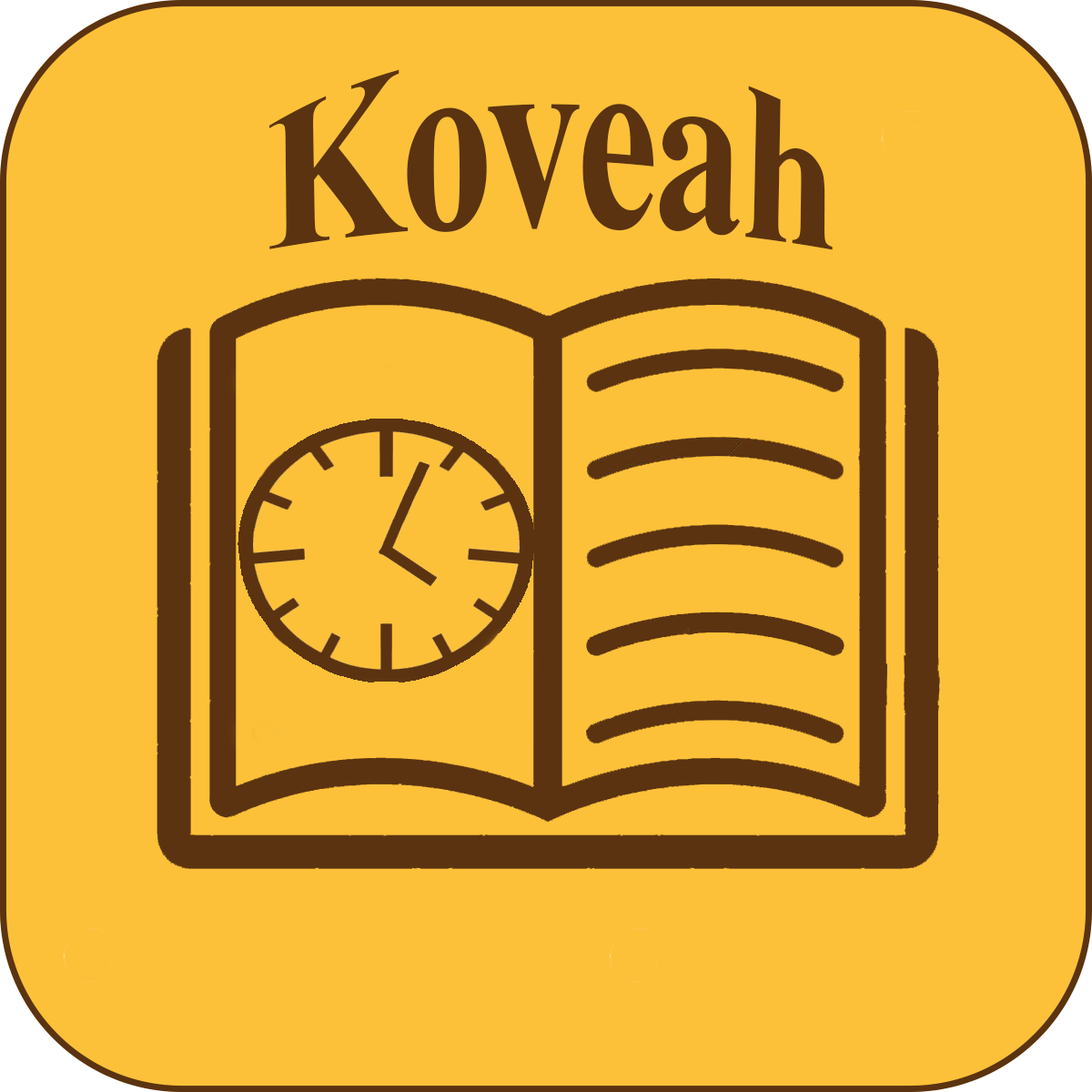
<style>
.page{position:relative;width:1092px;height:1092px;background:#fcc139}
.page>*{position:absolute;margin:0}
.t1{font:183.3px "TimesNewRomanPS-BoldMT";letter-spacing:-0.03em;color:#5b3310}
</style>
<div class="page">
<p class="t1" style="left:269px;top:69px;width:564px;height:181px">Koveah</p>
</div>
